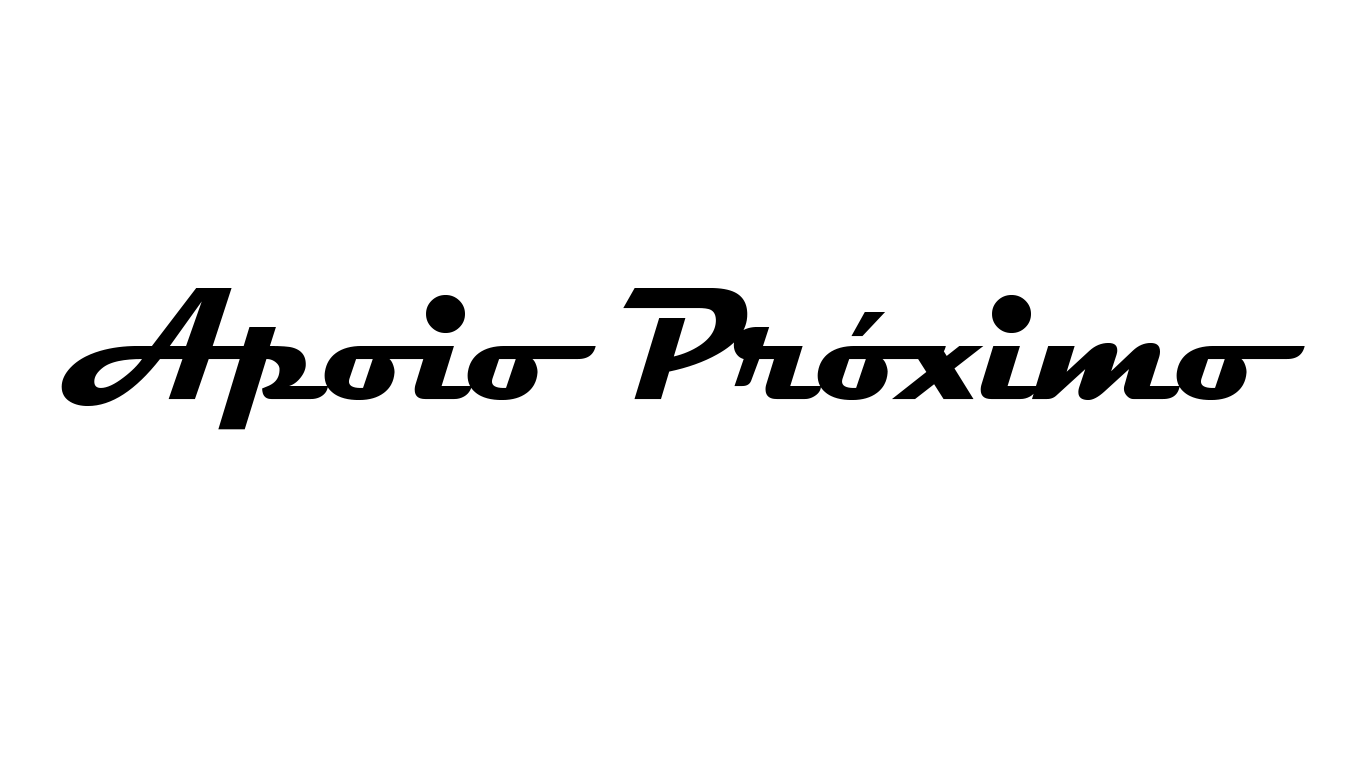
<style>
.page{position:relative;width:1366px;height:768px;background:#ffffff}
.page>*{position:absolute;margin:0}
.t1{font:160.9px "Magneto-Bold";color:#000000;scale:0.93 1}
</style>
<div class="page">
<p class="t1" style="left:61px;top:288px;width:1244px;height:142px">Apoio Próximo</p>
</div>
